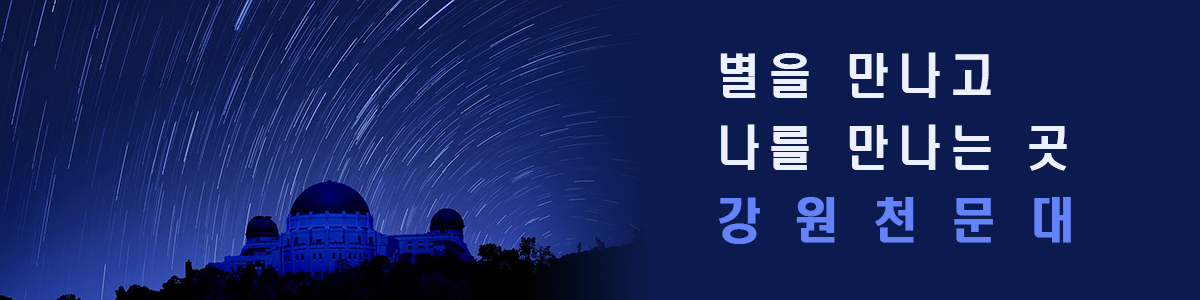
<style>
.page{position:relative;width:1200px;height:300px;background:#0b1b4f}
.page>*{position:absolute;margin:0}
.t1{font:48px/36px "H2hdrM";letter-spacing:0.2em;color:#ecf0ff;scale:0.92 1}
.t2{font:48px/36px "H2hdrM";letter-spacing:0.2em;color:#6483fa;font-weight:bold;scale:0.92 1}
</style>
<div class="page">
<p class="t1" style="left:719px;top:52px;width:352px;height:192px">별을 만나고<br><br>나를 만나는 곳<br><br><span class="t2">강 원 천 문 대</span></p>
</div>
